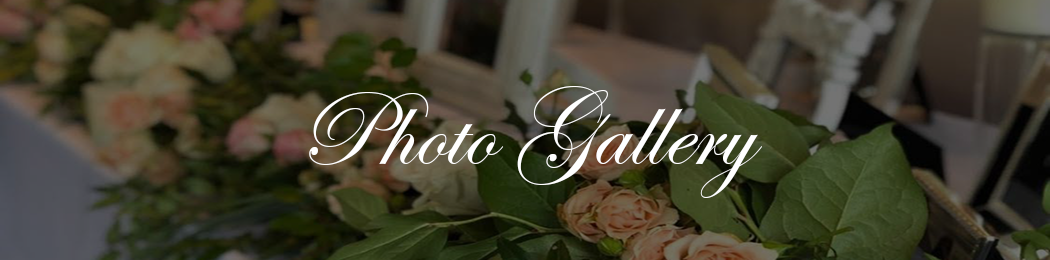
<style>
.page{position:relative;width:1050px;height:260px}
.page>*{position:absolute;margin:0}
.t1{font:107.5px "EdwardianScriptITC";color:#ffffff}
</style>
<div class="page">
<p class="t1" style="left:309px;top:86px;width:453px;height:112px">Photo Gallery</p>
</div>
